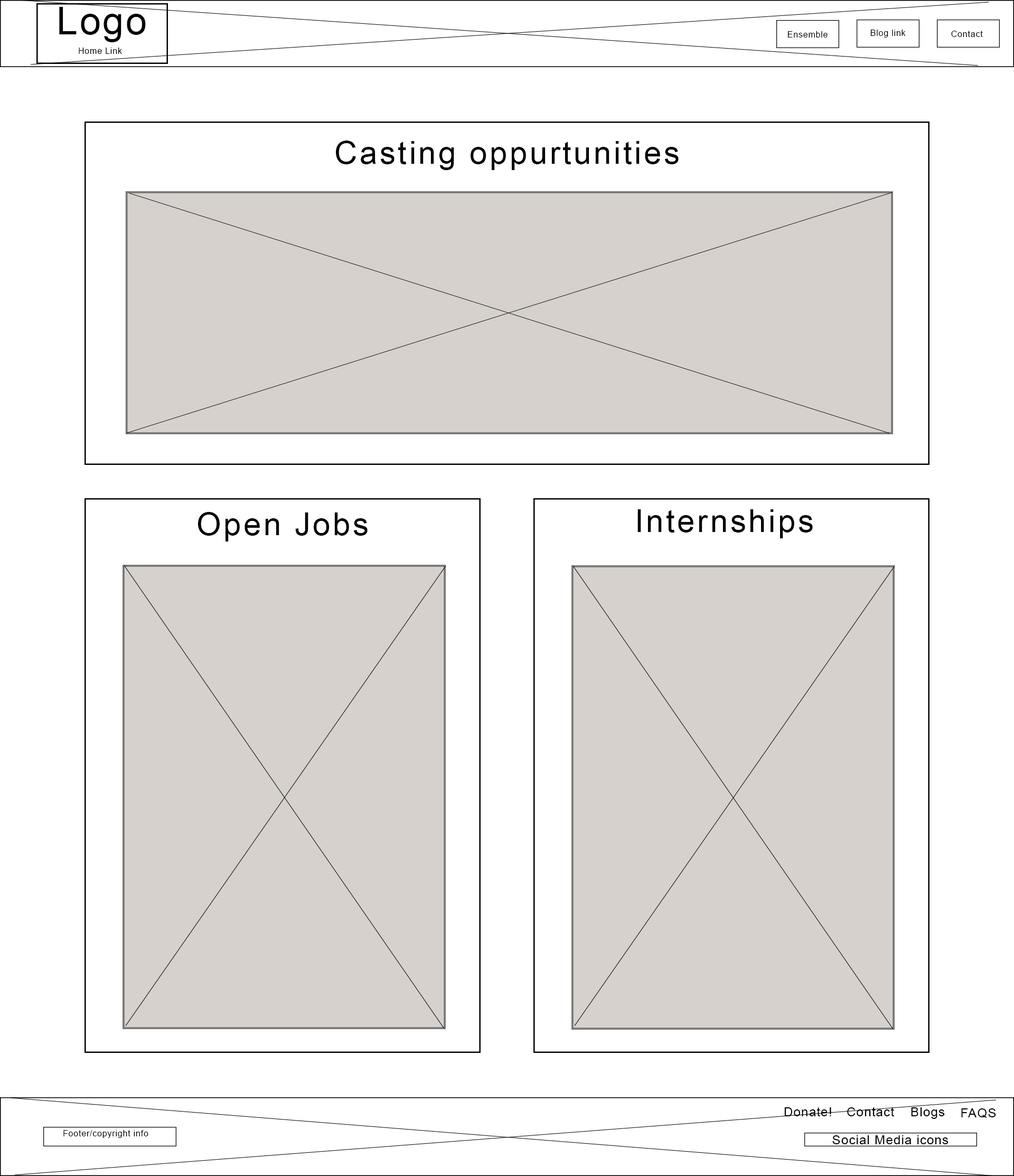
<style>
.page{position:relative;width:1014px;height:1176px;background:#ffffff}
.page>*{position:absolute;margin:0}
.t1{font:38px "ArialMT";letter-spacing:0.05em;color:#000000}
.t2{font:8.5px "ArialMT";letter-spacing:0.05em;color:#000000}
.t3{font:31.7px "ArialMT";letter-spacing:0.075em;color:#000000}
.t4{font:12.7px "ArialMT";letter-spacing:0.05em;color:#000000}
</style>
<div class="page">
<p class="t1" style="left:59px;top:7px;width:87px;height:35px">Logo</p>
<p class="t2" style="left:870px;top:30px;width:36px;height:8px">Blog link</p>
<p class="t2" style="left:788px;top:31px;width:40px;height:7px">Ensemble</p>
<p class="t2" style="left:951px;top:31px;width:32px;height:6px">Contact</p>
<p class="t2" style="left:79px;top:48px;width:43px;height:6px">Home Link</p>
<p class="t3" style="left:336px;top:141px;width:343px;height:29px">Casting oppurtunities</p>
<p class="t3" style="left:638px;top:509px;width:175px;height:29px">Internships</p>
<p class="t3" style="left:198px;top:512px;width:170px;height:29px">Open Jobs</p>
<p class="t4" style="left:784px;top:1107px;width:47px;height:9px">Donate!</p>
<p class="t4" style="left:847px;top:1107px;width:47px;height:9px">Contact</p>
<p class="t4" style="left:911px;top:1107px;width:34px;height:12px">Blogs</p>
<p class="t4" style="left:961px;top:1108px;width:35px;height:10px">FAQS</p>
<p class="t2" style="left:63px;top:1130px;width:85px;height:8px">Footer/copyright info</p>
<p class="t4" style="left:832px;top:1135px;width:117px;height:9px">Social Media icons</p>
</div>
